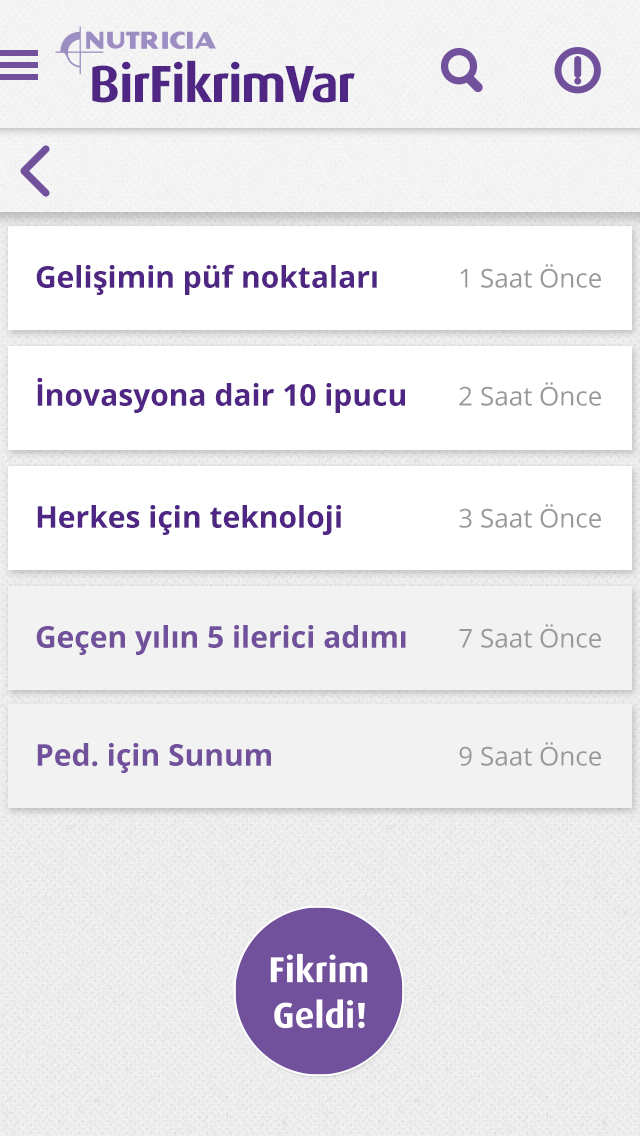
<style>
.page{position:relative;width:640px;height:1136px;background:#ffffff}
.page>*{position:absolute;margin:0}
.t1{font:52.5px "DaxPro-Bold";letter-spacing:-0.025em;color:#4f2683}
.t2{font:30px "OpenSans-Bold";color:#4f2683}
.t3{font:26px "OpenSans";color:#999999}
.t4{font:30px "OpenSans-Bold";color:#72519c}
</style>
<div class="page">
<p class="t1" style="left:92px;top:60px;width:263px;height:43px">BirFikrimVar</p>
<p class="t2" style="left:36px;top:264px;width:341px;height:31px">Gelişimin püf noktaları</p>
<p class="t3" style="left:460px;top:264px;width:141px;height:24px">1 Saat Önce</p>
<p class="t2" style="left:37px;top:377px;width:368px;height:36px">İnovasyona dair 10 ipucu</p>
<p class="t3" style="left:459px;top:382px;width:142px;height:24px">2 Saat Önce</p>
<p class="t2" style="left:37px;top:505px;width:304px;height:30px">Herkes için teknoloji</p>
<p class="t3" style="left:459px;top:504px;width:142px;height:24px">3 Saat Önce</p>
<p class="t4" style="left:36px;top:625px;width:370px;height:30px">Geçen yılın 5 ilerici adımı</p>
<p class="t3" style="left:459px;top:624px;width:142px;height:24px">7 Saat Önce</p>
<p class="t4" style="left:37px;top:743px;width:234px;height:30px">Ped. için Sunum</p>
<p class="t3" style="left:459px;top:742px;width:142px;height:24px">9 Saat Önce</p>
</div>
